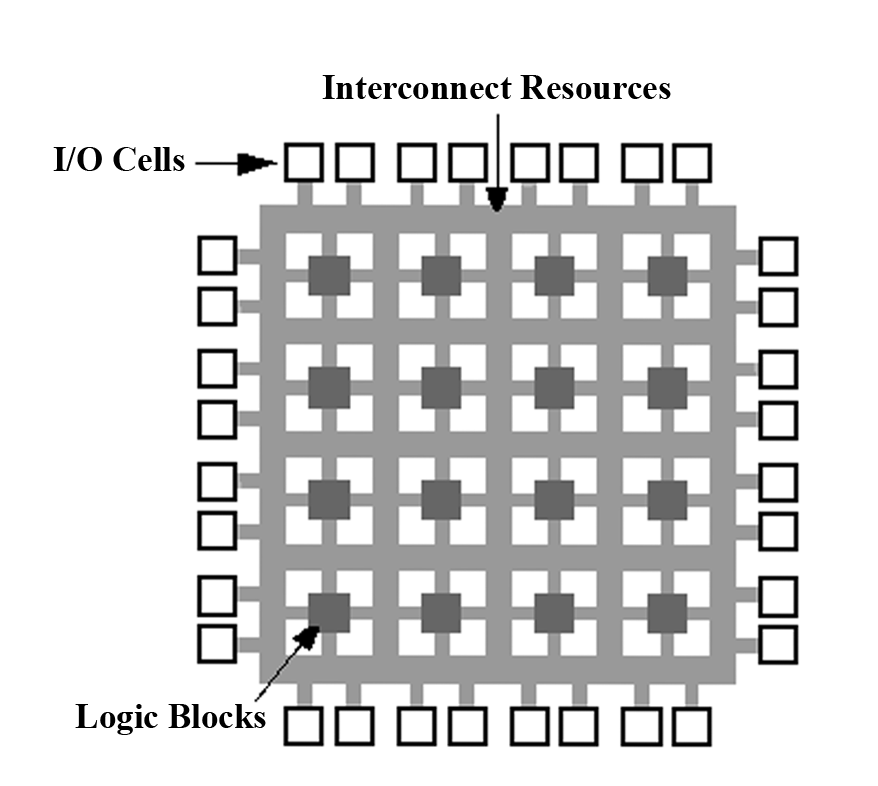
<style>
.page{position:relative;width:878px;height:786px;background:#ffffff}
.page>*{position:absolute;margin:0}
.t1{font:35px "TimesNewRomanPS-BoldMT";color:#000000}
</style>
<div class="page">
<p class="t1" style="left:322px;top:75px;width:349px;height:24px">Interconnect Resources</p>
<p class="t1" style="left:53px;top:147px;width:132px;height:24px">I/O Cells</p>
<p class="t1" style="left:75px;top:704px;width:191px;height:31px">Logic Blocks</p>
</div>
